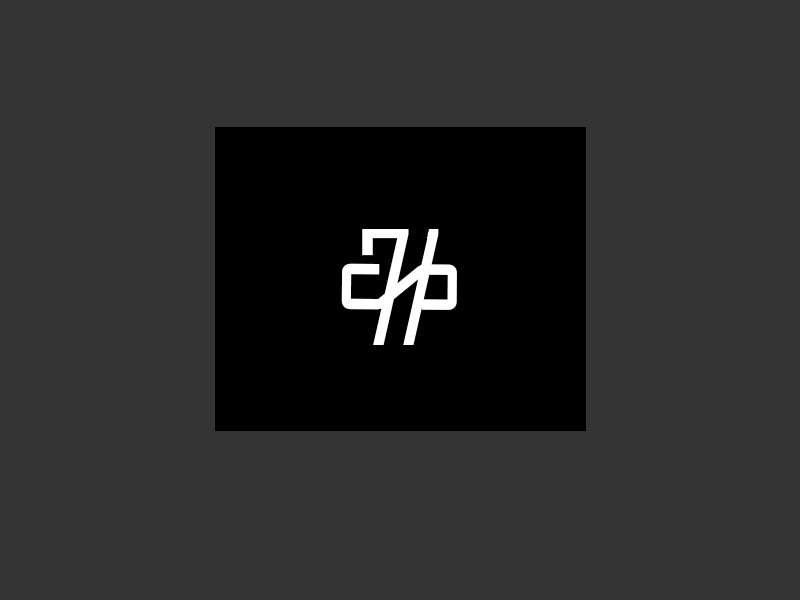
<style>
.page{position:relative;width:800px;height:600px;background:#333333}
.page>*{position:absolute;margin:0}
.t1{font:152.4px "AgencyFB-Reg";color:#ffffff}
.t2{font:149.9px "AgencyFB-Reg";color:#ffffff}
</style>
<div class="page">
<p class="t1" style="left:362px;top:229px;width:47px;height:116px">7</p>
<p class="t2" style="left:341px;top:263px;width:116px;height:47px;rotate:90deg">S</p>
</div>
